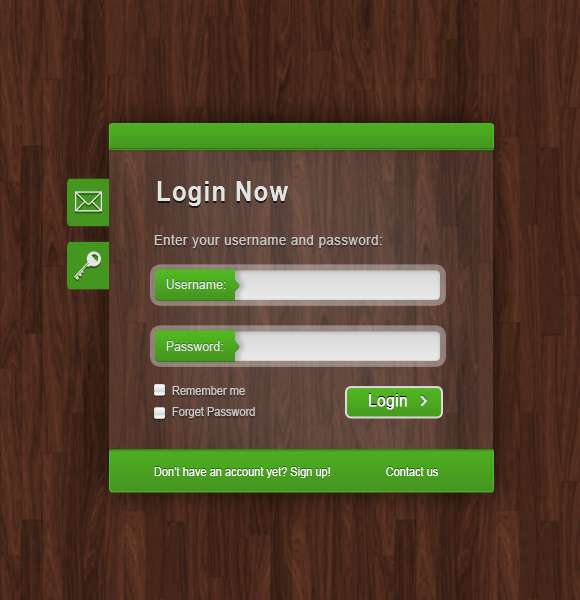
<style>
.page{position:relative;width:580px;height:600px}
.page>*{position:absolute;margin:0}
.t1{font:26.5px "Arial-BoldMT";letter-spacing:0.05em;color:#e4e4e4;scale:0.9 1}
.t2{font:13.6px "ArialMT";letter-spacing:0.05em;color:#c8c8c8;scale:0.95 1}
.t3{font:12.6px "ArialMT";letter-spacing:0.02em;color:#e4e4e4;scale:0.95 1}
.t4{font:12.6px "ArialMT";letter-spacing:0.02em;color:#dfdfdf;scale:0.95 1}
.t5{font:11.6px "ArialMT";color:#c8c8c8;scale:0.95 1}
.t6{font:15.6px "ArialMT";letter-spacing:0.02em;color:#f6f6f6;font-weight:bold;scale:0.96 1}
.t7{font:11.6px "ArialMT";color:#ffffff;scale:0.95 1}
</style>
<div class="page">
<p class="t1" style="left:157px;top:181px;width:131px;height:25px">Login Now</p>
<p class="t2" style="left:154px;top:234px;width:228px;height:14px">Enter your username and password:</p>
<p class="t3" style="left:166px;top:279px;width:60px;height:10px">Username:</p>
<p class="t4" style="left:166px;top:341px;width:57px;height:10px">Password:</p>
<p class="t5" style="left:172px;top:386px;width:73px;height:9px">Remember me</p>
<p class="t6" style="left:369px;top:394px;width:38px;height:16px">Login</p>
<p class="t5" style="left:172px;top:407px;width:83px;height:11px">Forget Password</p>
<p class="t7" style="left:154px;top:467px;width:284px;height:11px">Don’t have an account yet? Sign up!                  Contact us</p>
</div>
